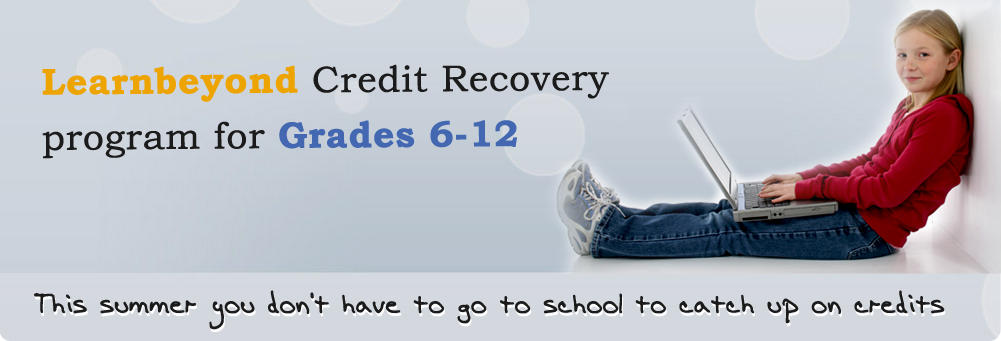
<style>
.page{position:relative;width:1001px;height:341px}
.page>*{position:absolute;margin:0}
.t1{font:36.9px/55.4px "BookmanOldStyle";color:#1b1b1b;font-weight:bold}
.t2{font:36.9px/55.4px "BookmanOldStyle-Bold";color:#eda400;font-weight:bold}
.t3{font:36.9px/55.4px "BookmanOldStyle-Bold";color:#4368b1;font-weight:bold}
.t4{font:29.3px "AEnigmaScrawl(BRK)";color:#1b1b1b;font-weight:bold}
</style>
<div class="page">
<p class="t1" style="left:42px;top:64px;width:567px;height:95px"><span class="t2">Learnbeyond</span> Credit Recovery <br>program for <span class="t3">Grades 6-12</span></p>
<p class="t4" style="left:34px;top:290px;width:911px;height:40px">This summer you don't have to go to school to catch up on credits</p>
</div>
